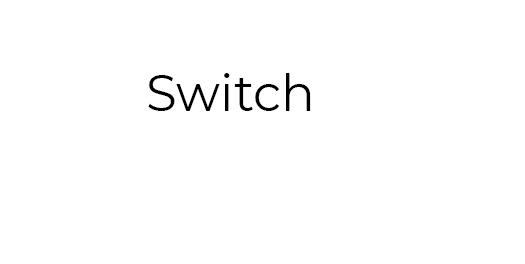
<style>
.page{position:relative;width:525px;height:264px;background:#ffffff}
.page>*{position:absolute;margin:0}
.t1{font:50px "Montserrat-Regular";color:#000000}
</style>
<div class="page">
<p class="t1" style="left:148px;top:73px;width:163px;height:38px">Switch</p>
</div>
